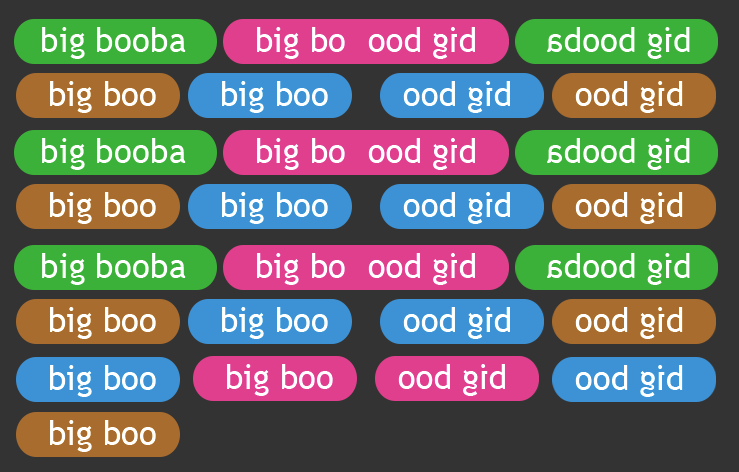
<style>
.page{position:relative;width:739px;height:472px;background:#333333}
.page>*{position:absolute;margin:0}
.t1{font:33.8px "TrebuchetMS";color:#e8e8e8}
.t2{font:33.8px "TrebuchetMS";color:#f0f0f0}
</style>
<div class="page">
<p class="t1" style="left:42px;top:27px;width:144px;height:32px">big booba</p>
<p class="t2" style="left:257px;top:27px;width:106px;height:32px">big boo</p>
<p class="t2" style="left:368px;top:27px;width:107px;height:32px;rotate:180deg">big boo</p>
<p class="t1" style="left:547px;top:27px;width:143px;height:32px;rotate:180deg">big booba</p>
<p class="t2" style="left:50px;top:81px;width:106px;height:32px">big boo</p>
<p class="t2" style="left:222px;top:81px;width:106px;height:32px">big boo</p>
<p class="t2" style="left:403px;top:81px;width:107px;height:32px;rotate:180deg">big boo</p>
<p class="t2" style="left:575px;top:81px;width:108px;height:32px;rotate:180deg">big boo</p>
<p class="t1" style="left:42px;top:138px;width:144px;height:32px">big booba</p>
<p class="t2" style="left:257px;top:138px;width:106px;height:32px">big boo</p>
<p class="t2" style="left:368px;top:138px;width:107px;height:32px;rotate:180deg">big boo</p>
<p class="t1" style="left:547px;top:138px;width:143px;height:32px;rotate:180deg">big booba</p>
<p class="t2" style="left:50px;top:192px;width:106px;height:32px">big boo</p>
<p class="t2" style="left:222px;top:192px;width:106px;height:32px">big boo</p>
<p class="t2" style="left:403px;top:192px;width:107px;height:32px;rotate:180deg">big boo</p>
<p class="t2" style="left:575px;top:192px;width:108px;height:32px;rotate:180deg">big boo</p>
<p class="t1" style="left:42px;top:253px;width:144px;height:32px">big booba</p>
<p class="t2" style="left:257px;top:253px;width:106px;height:32px">big boo</p>
<p class="t2" style="left:368px;top:253px;width:107px;height:32px;rotate:180deg">big boo</p>
<p class="t1" style="left:547px;top:253px;width:143px;height:32px;rotate:180deg">big booba</p>
<p class="t2" style="left:50px;top:307px;width:106px;height:32px">big boo</p>
<p class="t2" style="left:222px;top:307px;width:106px;height:32px">big boo</p>
<p class="t2" style="left:403px;top:307px;width:107px;height:32px;rotate:180deg">big boo</p>
<p class="t2" style="left:575px;top:307px;width:108px;height:32px;rotate:180deg">big boo</p>
<p class="t2" style="left:50px;top:365px;width:106px;height:32px">big boo</p>
<p class="t2" style="left:227px;top:364px;width:106px;height:32px">big boo</p>
<p class="t2" style="left:398px;top:364px;width:107px;height:32px;rotate:180deg">big boo</p>
<p class="t2" style="left:575px;top:365px;width:108px;height:32px;rotate:180deg">big boo</p>
<p class="t2" style="left:50px;top:420px;width:106px;height:32px">big boo</p>
</div>
